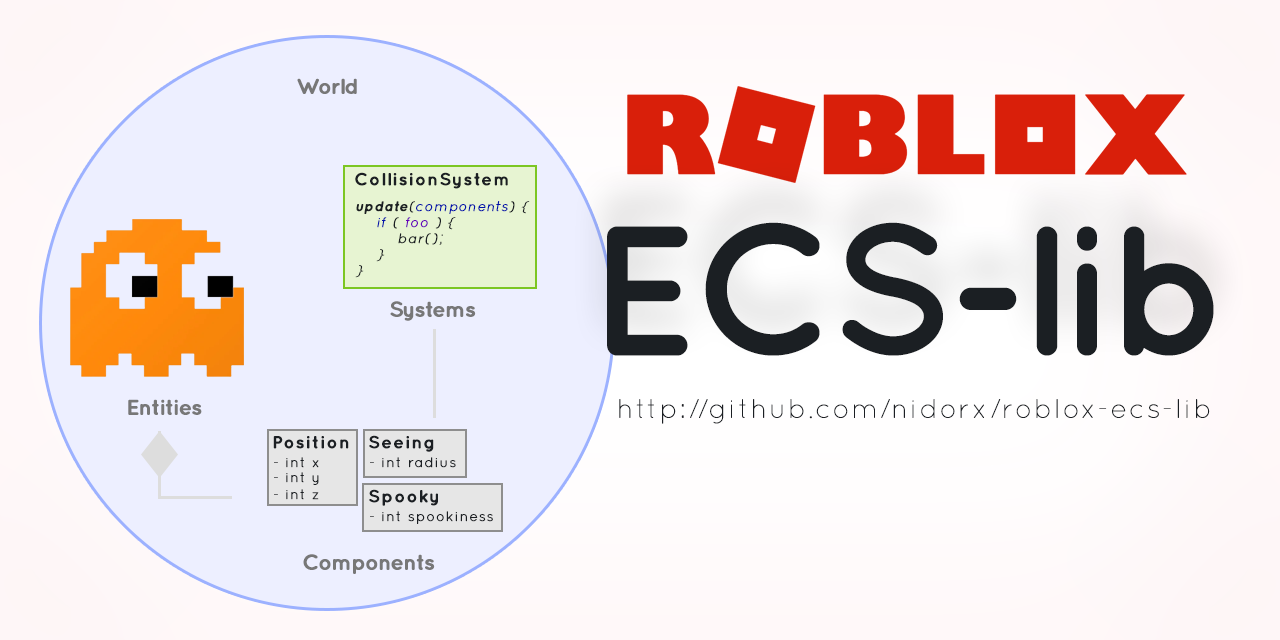
<style>
.page{position:relative;width:1280px;height:640px;background:#edefff}
.page>*{position:absolute;margin:0}
.t1{font:37px "Quicksand-Bold";letter-spacing:-0.05em;color:#777777;font-weight:bold}
.t2{font:30px "Quicksand-Bold";letter-spacing:0.05em;color:#1b1f23;font-weight:bold}
.t3{font:24px/16px "Quicksand-Italic";letter-spacing:0.05em;color:#1b1f23;font-weight:bold}
.t4{font:24px/16px "Quicksand-BoldItalic";letter-spacing:0.05em;color:#1b1f23;font-weight:bold}
.t5{font:24px/16px "Quicksand-Italic";letter-spacing:0.05em;color:#0011aa;font-weight:bold}
.t6{font:24px/16px "Quicksand-Italic";letter-spacing:0.05em;color:#6600bb;font-weight:bold}
.t7{font:315.6px "Quicksand-Bold";letter-spacing:-0.05em;color:#1b1f23;font-weight:bold}
.t8{font:46.2px "Quicksand-Light";letter-spacing:0.05em;color:#1b1f23;font-weight:bold}
.t9{font:24px "Quicksand-Regular";letter-spacing:0.05em;color:#1b1f23;font-weight:bold}
</style>
<div class="page">
<p class="t1" style="left:297px;top:78px;width:60px;height:16px">World</p>
<p class="t2" style="left:355px;top:172px;width:153px;height:17px">CollisionSystem</p>
<p class="t3" style="left:355px;top:201px;width:175px;height:77px"><span class="t4">update</span>(<span class="t5">components</span>) {<br>    <span class="t5">if </span>( <span class="t6">foo </span>) {<br>        bar();<br>    }<br>}</p>
<p class="t7" style="left:607px;top:222px;width:607px;height:134px">ECS-lib</p>
<p class="t1" style="left:390px;top:301px;width:86px;height:20px">Systems</p>
<p class="t1" style="left:128px;top:399px;width:74px;height:16px">Entities</p>
<p class="t8" style="left:619px;top:399px;width:591px;height:25px">http://github.com/nidorx/roblox-ecs-lib</p>
<p class="t2" style="left:273px;top:436px;width:76px;height:13px">Position</p>
<p class="t2" style="left:369px;top:435px;width:65px;height:17px">Seeing</p>
<p class="t9" style="left:274px;top:457px;width:45px;height:11px">- int x</p>
<p class="t9" style="left:370px;top:457px;width:86px;height:11px">- int radius</p>
<p class="t9" style="left:274px;top:472px;width:45px;height:13px">- int y</p>
<p class="t9" style="left:274px;top:489px;width:45px;height:11px">- int z</p>
<p class="t2" style="left:369px;top:489px;width:69px;height:17px">Spooky</p>
<p class="t9" style="left:370px;top:511px;width:123px;height:13px">- int spookiness</p>
<p class="t1" style="left:303px;top:554px;width:132px;height:20px">Components</p>
</div>
